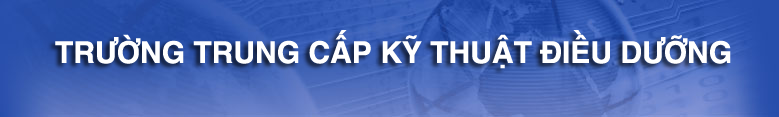
<style>
.page{position:relative;width:779px;height:117px}
.page>*{position:absolute;margin:0}
.t1{font:30px "SwitzerlandBold";color:#ffffff}
</style>
<div class="page">
<p class="t1" style="left:55px;top:30px;width:676px;height:39px">TRÛÚÂNG TRUNG CÊËP KYÄ THUÊÅT ÀIÏÌU DÛÚÄNG</p>
</div>
